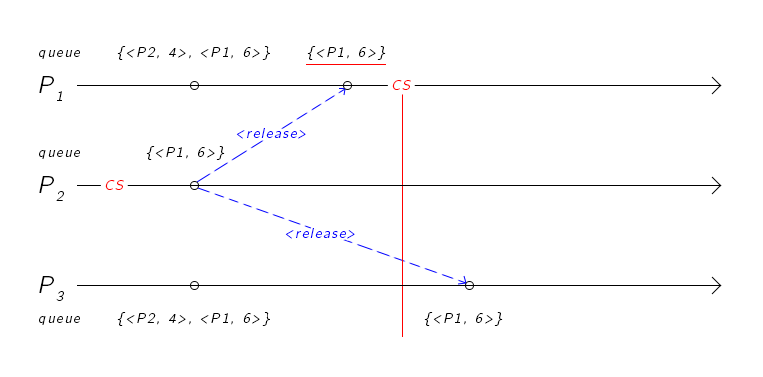
<style>
.page{position:relative;width:763px;height:377px;background:#ffffff}
.page>*{position:absolute;margin:0}
.t1{font:24px "CMUBright-Oblique";letter-spacing:0.12em;color:#000000}
.t2{font:24px "CMUBright-Oblique";letter-spacing:0.12em;color:#ff0000}
.t3{font:24px "CMUBright-Oblique";letter-spacing:0.12em;color:#0600ff}
</style>
<div class="page">
<p class="t1" style="left:39px;top:50px;width:41px;height:9px">queue</p>
<p class="t1" style="left:117px;top:46px;width:153px;height:14px">{&lt;P2, 4&gt;, &lt;P1, 6&gt;}</p>
<p class="t1" style="left:307px;top:46px;width:79px;height:14px">{&lt;P1, 6&gt;}</p>
<p class="t1" style="left:39px;top:76px;width:23px;height:25px">P1</p>
<p class="t2" style="left:392px;top:80px;width:19px;height:10px">CS</p>
<p class="t3" style="left:236px;top:128px;width:70px;height:11px">&lt;release&gt;</p>
<p class="t1" style="left:39px;top:150px;width:41px;height:9px">queue</p>
<p class="t1" style="left:146px;top:146px;width:79px;height:14px">{&lt;P1, 6&gt;}</p>
<p class="t1" style="left:39px;top:176px;width:25px;height:25px">P2</p>
<p class="t2" style="left:105px;top:180px;width:19px;height:10px">CS</p>
<p class="t3" style="left:285px;top:228px;width:70px;height:11px">&lt;release&gt;</p>
<p class="t1" style="left:39px;top:276px;width:25px;height:25px">P3</p>
<p class="t1" style="left:39px;top:316px;width:41px;height:9px">queue</p>
<p class="t1" style="left:117px;top:312px;width:153px;height:14px">{&lt;P2, 4&gt;, &lt;P1, 6&gt;}</p>
<p class="t1" style="left:424px;top:312px;width:79px;height:14px">{&lt;P1, 6&gt;}</p>
</div>
